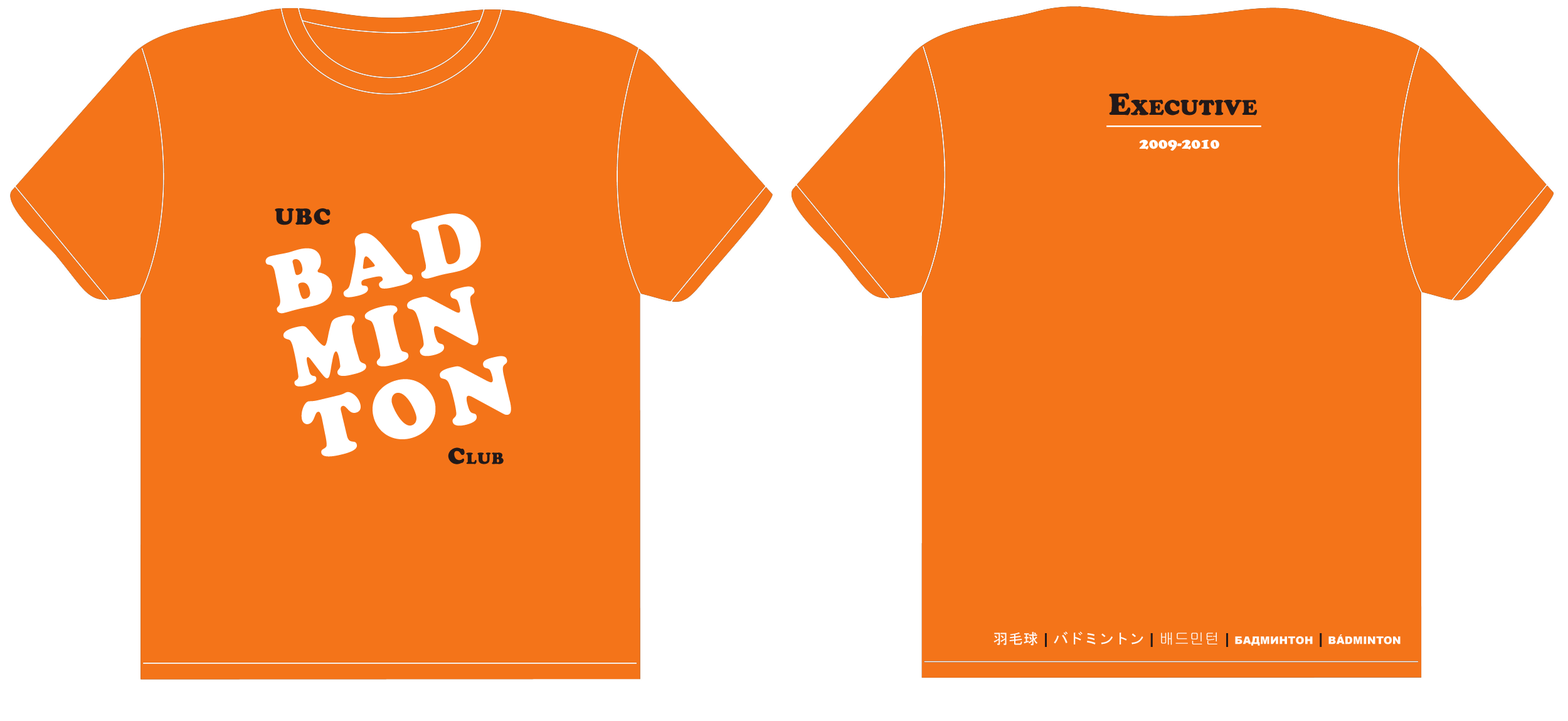
<style>
.page{position:relative;width:1568px;height:721px;background:#f47419}
.page>*{position:absolute;margin:0}
.t1{font:30.1px "CooperBlackStd";letter-spacing:0.01em;color:#221919;font-variant:small-caps}
.t2{font:15.1px "CooperBlackStd";color:#ffffff;font-variant:small-caps}
.t3{font:22.6px "CooperBlackStd";letter-spacing:0.05em;color:#221919;font-variant:small-caps}
.t4{font:81.5px/75.3px "CooperBlackStd";letter-spacing:0.1em;color:#ffffff;font-variant:small-caps}
.t5{font:15.1px "Arial-Black";letter-spacing:0.01em;color:#fdfafa;font-variant:small-caps}
.t6{font:15.1px "MS-Gothic";letter-spacing:0.01em;color:#fdfafa;font-variant:small-caps}
.t7{font:15.1px "Arial-Black";letter-spacing:0.01em;color:#221919;font-variant:small-caps}
.t8{font:15.1px "Gulim";letter-spacing:0.01em;color:#fdfafa;font-variant:small-caps}
</style>
<div class="page">
<p class="t1" style="left:1109px;top:93px;width:149px;height:22px">Executive</p>
<p class="t2" style="left:1139px;top:139px;width:80px;height:12px">2009-2010</p>
<p class="t3" style="left:275px;top:208px;width:56px;height:17px">UBC</p>
<p class="t4" style="left:265px;top:213px;width:246px;height:244px;rotate:-13deg">BAD<br>MIN<br>TON</p>
<p class="t3" style="left:448px;top:447px;width:56px;height:17px">Club</p>
<p class="t5" style="left:993px;top:631px;width:408px;height:16px"><span class="t6">羽毛球 </span><span class="t7">| </span><span class="t6">バドミントン </span><span class="t7">| </span><span class="t8">배드민턴 </span><span class="t7">|</span> бадминтон <span class="t7">|</span> bádminton</p>
</div>
